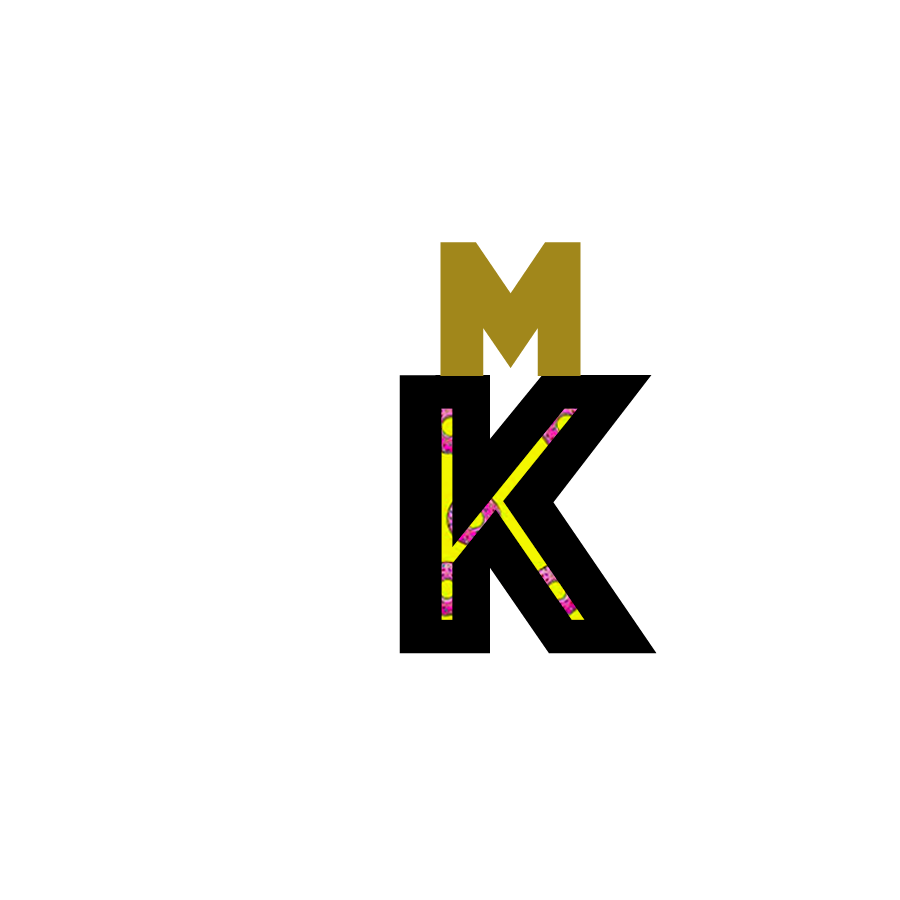
<style>
.page{position:relative;width:900px;height:900px;background:#ffffff}
.page>*{position:absolute;margin:0}
.t1{font:200px "Phosphate-Solid";color:#a1871b}
.t2{font:416.7px "Phosphate-Inline";color:#000000}
</style>
<div class="page">
<p class="t1" style="left:440px;top:242px;width:141px;height:134px">m</p>
<p class="t2" style="left:399px;top:375px;width:258px;height:279px">K</p>
</div>
